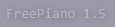
<style>
.page{position:relative;width:115px;height:27px;background:#9c99a8}
.page>*{position:absolute;margin:0}
.t1{font:14px "Consolas";color:#bab8c3}
</style>
<div class="page">
<p class="t1" style="left:7px;top:8px;width:98px;height:10px">FreePiano 1.5</p>
</div>
